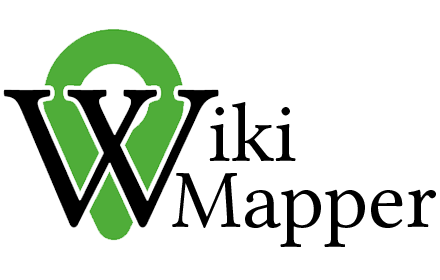
<style>
.page{position:relative;width:440px;height:280px;background:#ffffff}
.page>*{position:absolute;margin:0}
.t1{font:84.5px "LinLibertineO";color:#000000}
</style>
<div class="page">
<p class="t1" style="left:209px;top:102px;width:87px;height:59px">iki</p>
<p class="t1" style="left:172px;top:173px;width:264px;height:74px">Mapper</p>
</div>
